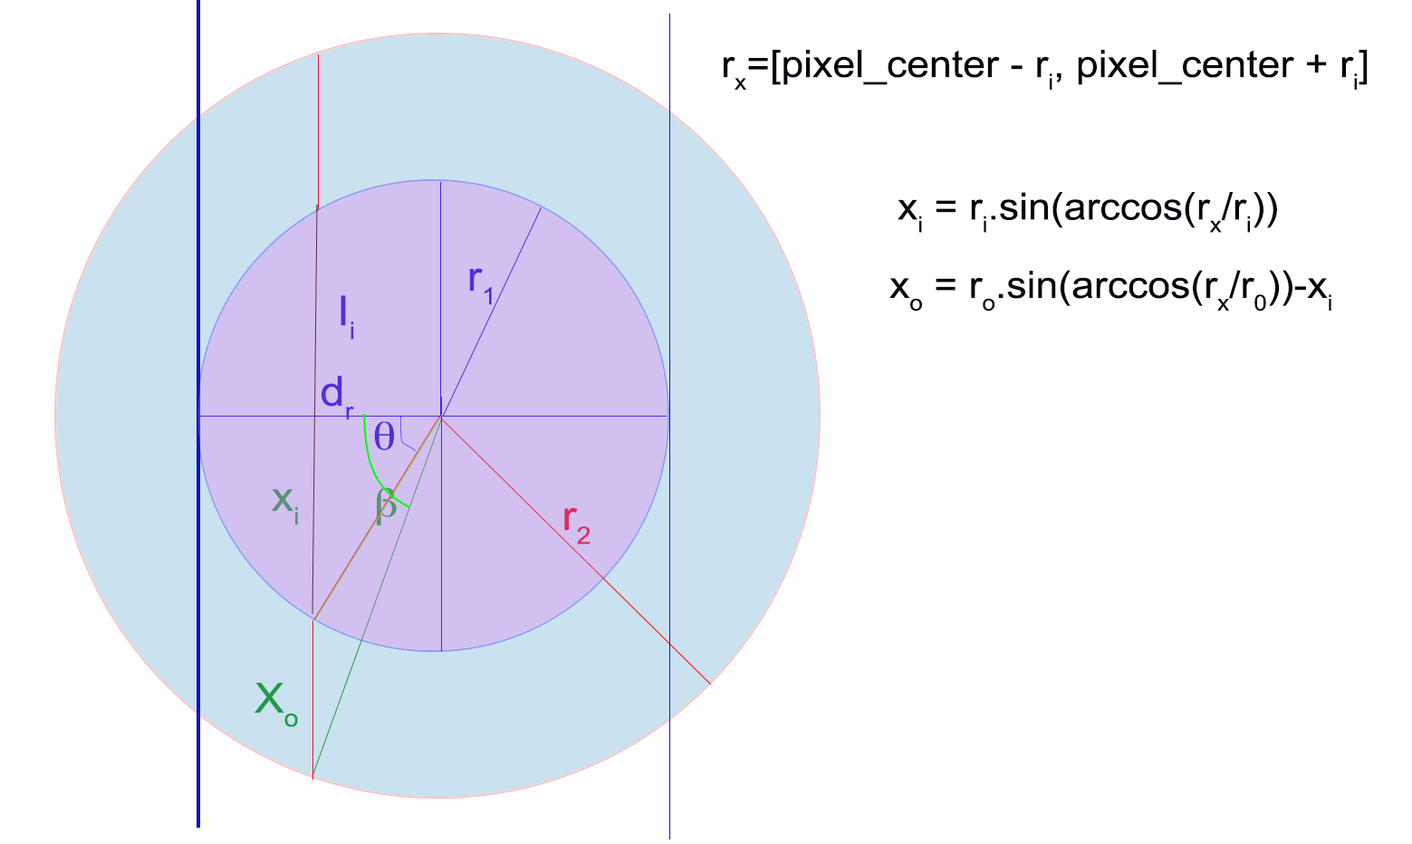
<style>
.page{position:relative;width:1412px;height:844px;background:#ffffff}
.page>*{position:absolute;margin:0}
.t1{font:37.7px "ArialMT";color:#02030b;scale:1.07 1}
.t2{font:41.5px "ArialMT";color:#4e30de;scale:1.07 1}
.t3{font:41.5px "ArialMT";color:#599179;scale:1.07 1}
.t4{font:41.5px "ArialMT";color:#db2d68;scale:1.07 1}
.t5{font:41.5px "ArialMT";color:#1d9c44;scale:1.07 1}
</style>
<div class="page">
<p class="t1" style="left:724px;top:50px;width:644px;height:40px">rx=[pixel_center - ri, pixel_center + ri]</p>
<p class="t1" style="left:898px;top:192px;width:379px;height:41px">xi = ri.sin(arccos(rx/ri))</p>
<p class="t2" style="left:469px;top:268px;width:23px;height:37px">r1</p>
<p class="t1" style="left:890px;top:270px;width:442px;height:42px">xo = ro.sin(arccos(rx/r0))-xi</p>
<p class="t2" style="left:341px;top:295px;width:13px;height:45px">Ii</p>
<p class="t2" style="left:322px;top:376px;width:32px;height:44px">dr</p>
<p class="t3" style="left:272px;top:489px;width:26px;height:36px">xi</p>
<p class="t4" style="left:564px;top:508px;width:27px;height:36px">r2</p>
<p class="t5" style="left:255px;top:683px;width:43px;height:44px">Xo</p>
</div>
